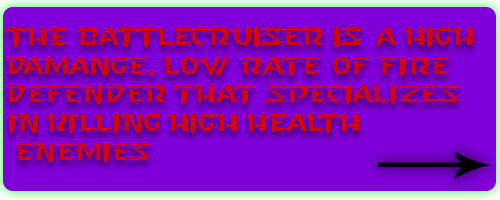
<style>
.page{position:relative;width:500px;height:200px;background:#8000d9}
.page>*{position:absolute;margin:0}
.t1{font:24px "StarcraftNormal";color:#d20606}
</style>
<div class="page">
<p class="t1" style="left:5px;top:28px;width:468px;height:135px">The battlecruiser is a high damange, low rate of fire defender that specializes in killing high health<br> enemies</p>
</div>
